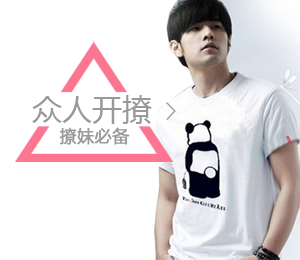
<style>
.page{position:relative;width:300px;height:260px;background:#ffffff}
.page>*{position:absolute;margin:0}
.t1{font:30px "MicrosoftYaHei";color:#999999}
.t2{font:17.1px "MicrosoftYaHei";color:#999999;font-weight:bold}
</style>
<div class="page">
<p class="t1" style="left:32px;top:95px;width:120px;height:29px">众人开撩</p>
<p class="t2" style="left:59px;top:127px;width:71px;height:18px">撩妹必备</p>
</div>
